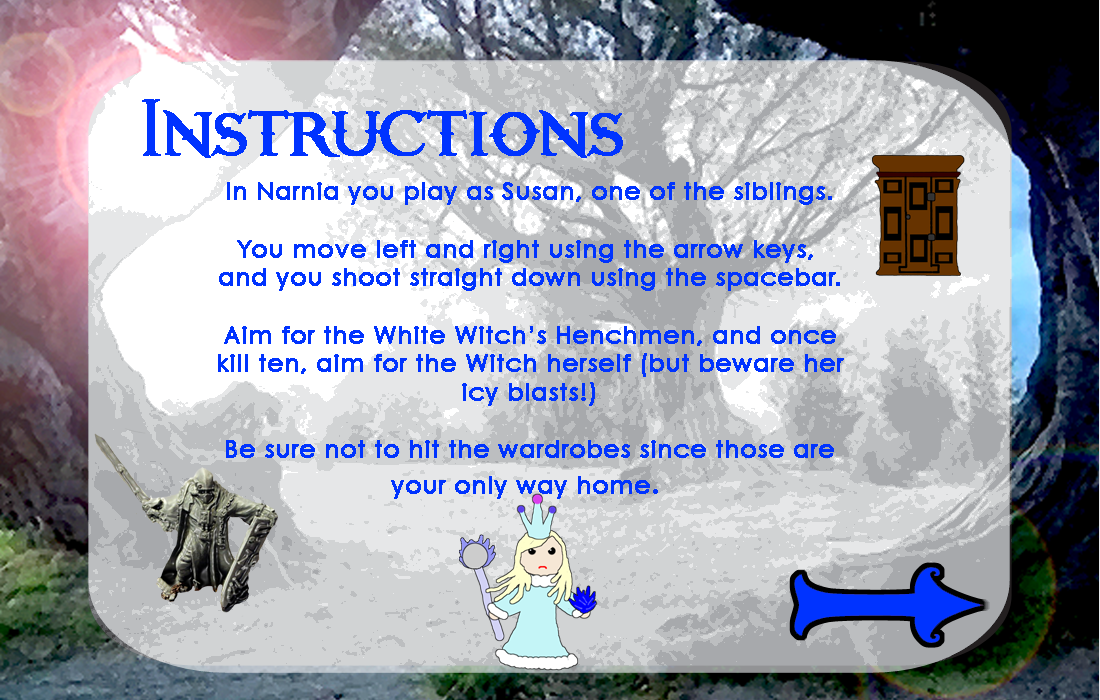
<style>
.page{position:relative;width:1100px;height:700px}
.page>*{position:absolute;margin:0}
.t1{font:59.8px "Narnia-BLL";color:#0033ff;font-weight:bold}
.t2{font:23.9px "CenturyGothic";color:#0033ff;font-weight:bold}
.t3{font:29.9px "CenturyGothic";color:#0033ff;font-weight:bold}
</style>
<div class="page">
<p class="t1" style="left:142px;top:99px;width:481px;height:59px">Instructions</p>
<p class="t2" style="left:218px;top:182px;width:626px;height:317px;text-align:center">In Narnia you play as Susan, one of the siblings.<br><br>You move left and right using the arrow keys, <br>and you shoot straight down using the spacebar.<br><br>Aim for the White Witch’s Henchmen, and once<br>kill ten, aim for the Witch herself (but beware her<br>icy blasts!)<br><br>Be sure not to hit the wardrobes since those are<br>your only way home<span class="t3">.</span></p>
</div>
